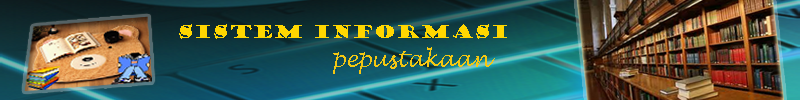
<style>
.page{position:relative;width:800px;height:100px}
.page>*{position:absolute;margin:0}
.t1{font:18px "GoudyStout";color:#ffd600}
.t2{font:22px "LucidaHandwriting-Italic";color:#f4c712}
</style>
<div class="page">
<p class="t1" style="left:179px;top:24px;width:328px;height:15px">sistem informasi</p>
<p class="t2" style="left:333px;top:47px;width:162px;height:27px">pepustakaan</p>
</div>
